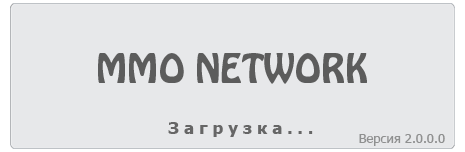
<style>
.page{position:relative;width:465px;height:152px;background:#e7e8ea}
.page>*{position:absolute;margin:0}
.t1{font:36px "HoboStd";color:#5c5c5c}
.t2{font:17px "Tahoma-Bold";color:#5c5c5c}
.t3{font:13px "Tahoma";color:#8f9090}
</style>
<div class="page">
<p class="t1" style="left:98px;top:53px;width:269px;height:31px">MMO NETWORK</p>
<p class="t2" style="left:168px;top:122px;width:145px;height:15px;opacity:0.93">З а г р у з к а . . .</p>
<p class="t3" style="left:359px;top:134px;width:86px;height:12px">Версия 2.0.0.0</p>
</div>
